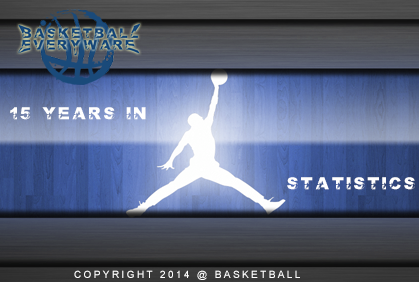
<style>
.page{position:relative;width:419px;height:282px}
.page>*{position:absolute;margin:0}
.t1{font:12px "LMSILoveThisGame";letter-spacing:0.24em;color:#ffffff;text-transform:uppercase}
.t2{font:10px "ArialMT";letter-spacing:0.24em;color:#ffffff;text-transform:uppercase}
</style>
<div class="page">
<p class="t1" style="left:10px;top:107px;width:136px;height:13px">15 years in</p>
<p class="t1" style="left:287px;top:177px;width:128px;height:13px">statistics</p>
<p class="t2" style="left:74px;top:270px;width:226px;height:10px">copyright 2014 @ basketball</p>
</div>
